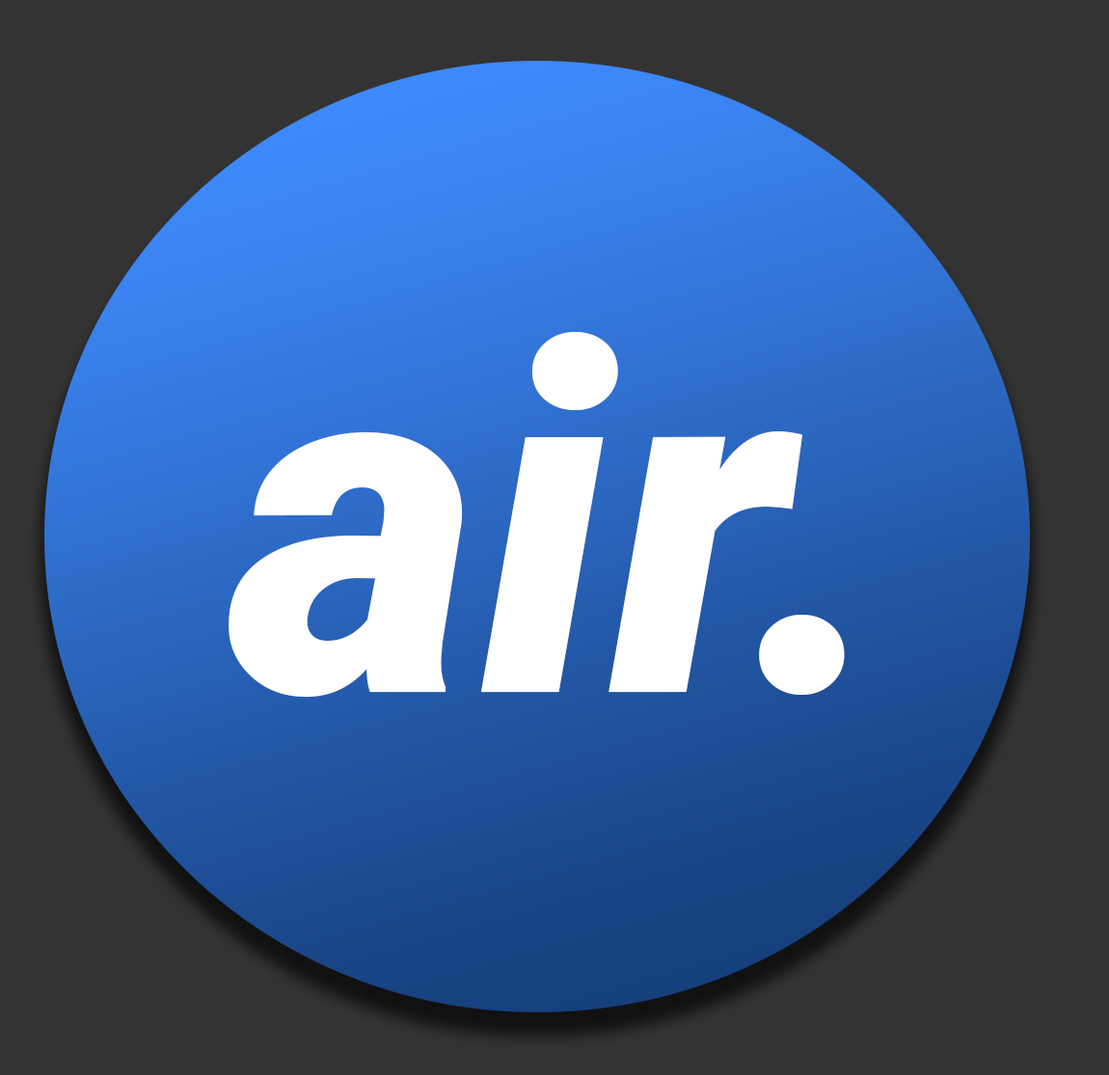
<style>
.page{position:relative;width:1109px;height:1075px;background:#333333}
.page>*{position:absolute;margin:0}
.t1{font:482.4px "Roboto-BlackItalic";color:#ffffff}
</style>
<div class="page">
<p class="t1" style="left:229px;top:332px;width:616px;height:366px">air.</p>
</div>
